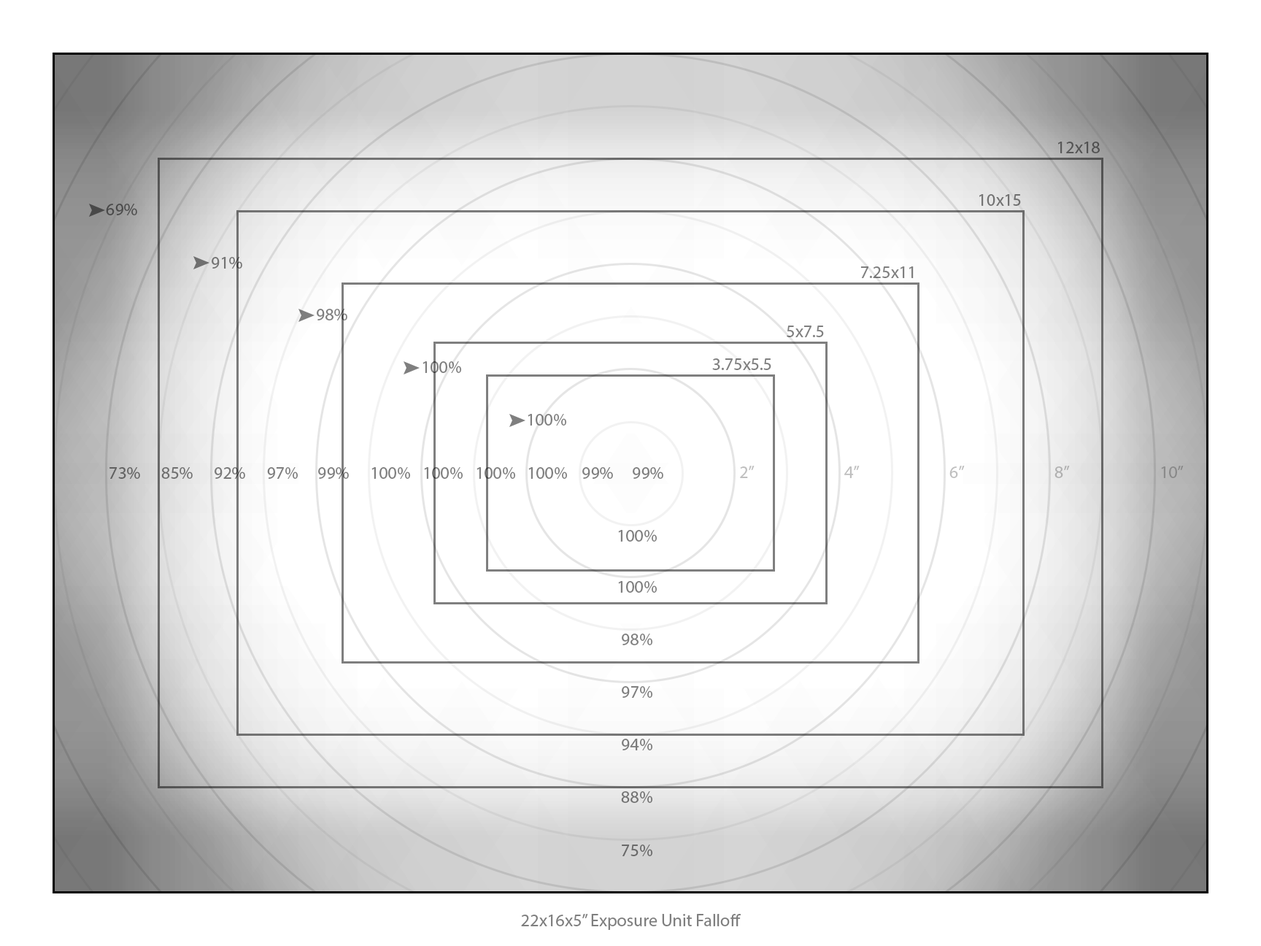
<style>
.page{position:relative;width:1261px;height:946px;background:#ffffff}
.page>*{position:absolute;margin:0}
.t1{font:17.5px "MyriadPro-Regular";color:#535353}
.t2{font:17.5px "MyriadPro-Regular";color:#727272}
.t3{font:17.5px "MyriadPro-Regular";color:#4c4c4c}
.t4{font:17.5px "MyriadPro-Regular"}
.t5{font:17.5px "MyriadPro-Regular";color:#737373}
.t6{font:17.5px "MyriadPro-Regular";color:#7f7f7f}
.t7{font:17.5px "MyriadPro-Regular";color:#666666}
.t8{font:17.5px "MyriadPro-Regular";color:#636363}
.t9{font:17.5px "MyriadPro-Regular";color:#707070}
.t10{font:17.5px "MyriadPro-Regular";color:#797979}
.t11{font:17.5px "MyriadPro-Regular";color:#7e7e7e}
.t12{font:17.5px "MyriadPro-Regular";color:#bfbfbf}
.t13{font:17.5px "MyriadPro-Regular";color:#b0b0b0}
.t14{font:17.5px "MyriadPro-Regular";color:#8b8b8b}
.t15{font:17.5px "MyriadPro-Regular";color:#7b7b7b}
.t16{font:17.5px "MyriadPro-Regular";color:#747474}
.t17{font:17.5px "MyriadPro-Regular";color:#696969}
</style>
<div class="page">
<p class="t1" style="left:1058px;top:142px;width:42px;height:11px">12x18</p>
<p class="t2" style="left:979px;top:194px;width:42px;height:12px">10x15</p>
<p class="t3" style="left:106px;top:204px;width:31px;height:11px">69%</p>
<p class="t4" style="left:107px;top:204px;width:30px;height:11px">74%</p>
<p class="t4" style="left:212px;top:257px;width:30px;height:12px">93%</p>
<p class="t5" style="left:212px;top:257px;width:30px;height:12px">91%</p>
<p class="t6" style="left:860px;top:266px;width:54px;height:12px">7.25x11</p>
<p class="t6" style="left:317px;top:309px;width:30px;height:11px">98%</p>
<p class="t6" style="left:317px;top:309px;width:30px;height:11px">98%</p>
<p class="t6" style="left:787px;top:325px;width:37px;height:12px">5x7.5</p>
<p class="t6" style="left:422px;top:361px;width:39px;height:12px">100%</p>
<p class="t6" style="left:712px;top:358px;width:59px;height:12px">3.75x5.5</p>
<p class="t6" style="left:528px;top:414px;width:38px;height:11px">100%</p>
<p class="t6" style="left:528px;top:414px;width:38px;height:11px">100%</p>
<p class="t7" style="left:109px;top:467px;width:31px;height:12px">74%</p>
<p class="t8" style="left:109px;top:467px;width:31px;height:12px">73%</p>
<p class="t9" style="left:161px;top:467px;width:32px;height:12px">85%</p>
<p class="t4" style="left:162px;top:467px;width:31px;height:12px">90%</p>
<p class="t10" style="left:215px;top:467px;width:30px;height:12px">95%</p>
<p class="t10" style="left:215px;top:467px;width:30px;height:12px">92%</p>
<p class="t4" style="left:267px;top:467px;width:31px;height:12px">98%</p>
<p class="t11" style="left:267px;top:467px;width:31px;height:12px">97%</p>
<p class="t6" style="left:318px;top:467px;width:31px;height:12px">99%</p>
<p class="t6" style="left:371px;top:467px;width:39px;height:12px">100%</p>
<p class="t6" style="left:371px;top:467px;width:39px;height:12px">100%</p>
<p class="t6" style="left:424px;top:467px;width:39px;height:12px">100%</p>
<p class="t6" style="left:424px;top:467px;width:39px;height:12px">100%</p>
<p class="t6" style="left:476px;top:467px;width:39px;height:12px">100%</p>
<p class="t6" style="left:476px;top:467px;width:39px;height:12px">100%</p>
<p class="t6" style="left:528px;top:467px;width:39px;height:12px">100%</p>
<p class="t6" style="left:528px;top:467px;width:39px;height:12px">100%</p>
<p class="t6" style="left:582px;top:467px;width:31px;height:12px">98%</p>
<p class="t6" style="left:582px;top:467px;width:31px;height:12px">99%</p>
<p class="t11" style="left:633px;top:467px;width:30px;height:12px">97%</p>
<p class="t11" style="left:633px;top:467px;width:30px;height:12px">99%</p>
<p class="t12" style="left:740px;top:466px;width:15px;height:12px">2”</p>
<p class="t12" style="left:844px;top:466px;width:16px;height:12px">4”</p>
<p class="t12" style="left:949px;top:466px;width:16px;height:12px">6”</p>
<p class="t13" style="left:1054px;top:466px;width:16px;height:12px">8”</p>
<p class="t14" style="left:1161px;top:466px;width:23px;height:12px">10”</p>
<p class="t6" style="left:618px;top:530px;width:39px;height:11px">100%</p>
<p class="t6" style="left:618px;top:581px;width:39px;height:12px">100%</p>
<p class="t6" style="left:622px;top:633px;width:30px;height:12px">96%</p>
<p class="t6" style="left:622px;top:633px;width:30px;height:12px">98%</p>
<p class="t11" style="left:622px;top:686px;width:30px;height:12px">97%</p>
<p class="t15" style="left:622px;top:738px;width:30px;height:12px">94%</p>
<p class="t16" style="left:621px;top:791px;width:31px;height:12px">88%</p>
<p class="t4" style="left:622px;top:791px;width:30px;height:12px">94%</p>
<p class="t4" style="left:621px;top:844px;width:31px;height:12px">82%</p>
<p class="t17" style="left:622px;top:844px;width:30px;height:12px">75%</p>
<p class="t6" style="left:521px;top:914px;width:220px;height:16px">22x16x5” Exposure Unit Falloff</p>
</div>
